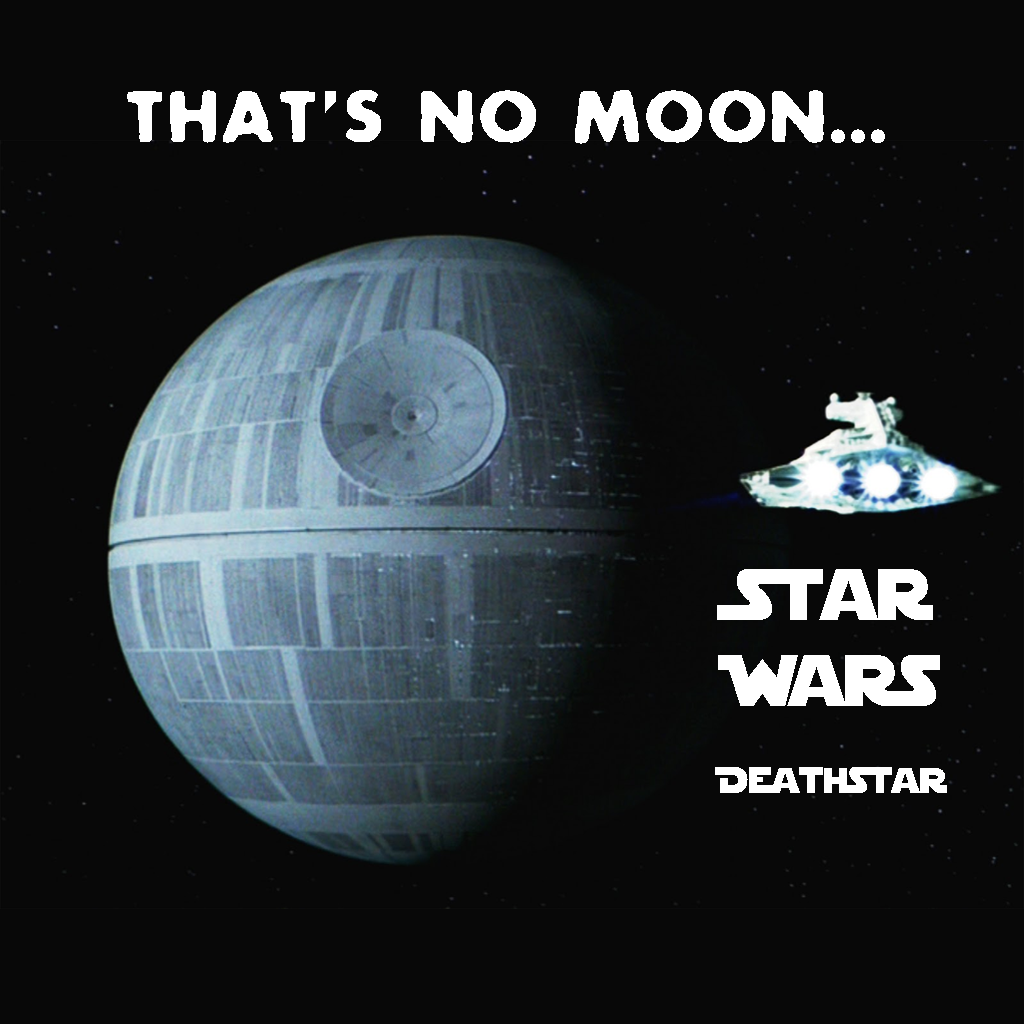
<style>
.page{position:relative;width:1024px;height:1024px;background:#080808}
.page>*{position:absolute;margin:0}
.t1{font:72px "Future-Rot";color:#ffffff}
.t2{font:72px "StarJediSpecialEdition";color:#ffffff}
.t3{font:36px "StarJediSpecialEdition";color:#ffffff}
</style>
<div class="page">
<p class="t1" style="left:127px;top:90px;width:758px;height:54px">That<span class="t2">’</span>s no Moon...</p>
<p class="t2" style="left:715px;top:569px;width:232px;height:224px;text-align:center">Star Wars<br><span class="t3"><br>DeathStar</span></p>
</div>
